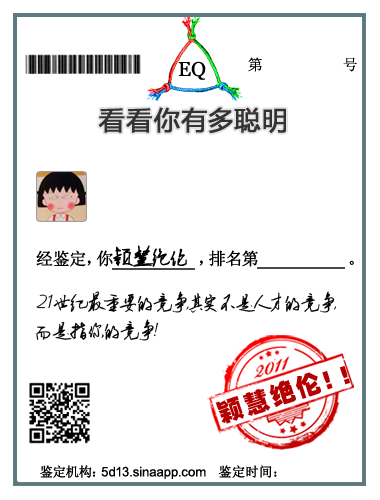
<style>
.page{position:relative;width:380px;height:500px;background:#ffffff}
.page>*{position:absolute;margin:0}
.t1{font:20px "Georgia";color:#000000}
.t2{font:15.1px "SimSun";letter-spacing:0.025em;color:#000000}
.t3{font:25.9px "MicrosoftYaHei";letter-spacing:0.025em;color:#333333;font-weight:bold}
.t4{font:17px "SimSun";color:#000000;font-weight:bold}
.t5{font:18.9px "Ò¶¸ùÓÑ¸Ö±ÊÐÐÊé¼òÌå";color:#000000;font-weight:bold}
.t6{font:18.9px/28.4px "Ò¶¸ùÓÑ¸Ö±ÊÐÐÊé¼òÌå";color:#000000}
.t7{font:24.6px "¾­µäÌØºÚ¼ò Regular";letter-spacing:0.1em;color:#b40000}
.t8{font:24.6px "¹ã½Ý¾ÓÃÔÄã×Ö¿â";letter-spacing:0.1em;color:#b40000}
.t9{font:13.2px "SimSun";color:#000000;font-weight:bold}
.t10{font:13.2px "ArialMT";color:#000000}
</style>
<div class="page">
<p class="t1" style="left:178px;top:61px;width:28px;height:19px">EQ</p>
<p class="t2" style="left:248px;top:57px;width:109px;height:15px">第          号</p>
<p class="t3" style="left:99px;top:107px;width:187px;height:26px">看看你有多聪明</p>
<p class="t4" style="left:36px;top:245px;width:151px;height:22px">经鉴定，你<span class="t5">颖慧绝伦</span></p>
<p class="t4" style="left:199px;top:250px;width:155px;height:17px">，排名第              。</p>
<p class="t6" style="left:36px;top:291px;width:300px;height:50px">21世纪最重要的竞争，其实不是人才的竞争，<br>而是指你的竞争！</p>
<p class="t7" style="left:215px;top:366px;width:135px;height:58px;rotate:-18deg">颖慧绝伦<span class="t8">！！</span></p>
<p class="t9" style="left:40px;top:465px;width:56px;height:13px">鉴定机构：</p>
<p class="t10" style="left:101px;top:466px;width:105px;height:13px">5d13.sinaapp.com</p>
<p class="t9" style="left:218px;top:465px;width:59px;height:13px">鉴定时间：</p>
</div>
